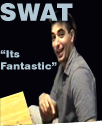
<style>
.page{position:relative;width:102px;height:126px;background:#040309}
.page>*{position:absolute;margin:0}
.t1{font:24px "Swiss721BT-Black";color:#b2c9d5}
.t2{font:10px "Swiss721BT-Black";color:#b2c9d5}
</style>
<div class="page">
<p class="t1" style="left:0px;top:3px;width:73px;height:18px">SWAT</p>
<p class="t2" style="left:0px;top:50px;width:57px;height:20px">“Its <br>Fantastic”</p>
</div>
